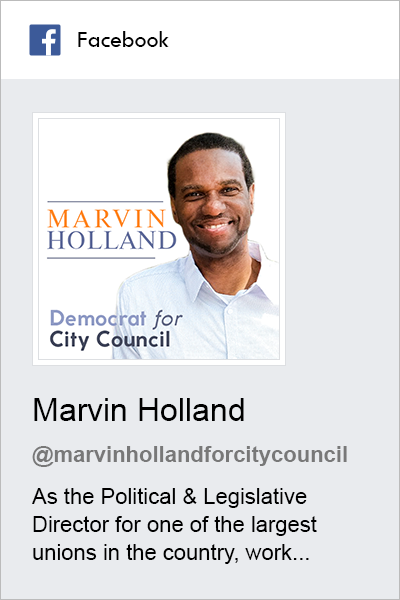
<style>
.page{position:relative;width:400px;height:600px;background:#e9ebee}
.page>*{position:absolute;margin:0}
.t1{font:24px "TwCenMT-Regular";color:#000000}
.t2{font:32px "ArialMT";color:#000000}
.t3{font:22px "Arial-BoldMT";color:#787878}
.t4{font:22px/28px "ArialMT";color:#000000}
</style>
<div class="page">
<p class="t1" style="left:78px;top:31px;width:91px;height:16px">Facebook</p>
<p class="t2" style="left:34px;top:398px;width:210px;height:23px">Marvin Holland</p>
<p class="t3" style="left:32px;top:446px;width:315px;height:21px">@marvinhollandforcitycouncil</p>
<p class="t4" style="left:32px;top:488px;width:285px;height:76px">As the Political &amp; Legislative Director for one of the largest unions in the country, work...</p>
</div>
